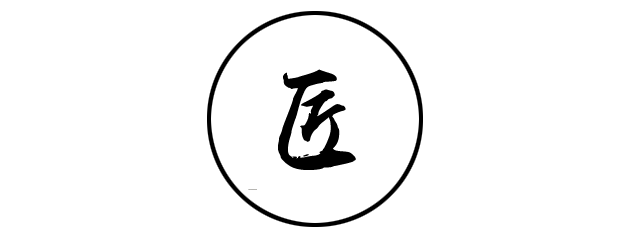
<style>
.page{position:relative;width:640px;height:240px;background:#ffffff}
.page>*{position:absolute;margin:0}
.t1{font:125.1px "yuweij";letter-spacing:0.05em;color:#000000;font-weight:bold}
</style>
<div class="page">
<p class="t1" style="left:278px;top:69px;width:78px;height:101px">匠</p>
</div>
